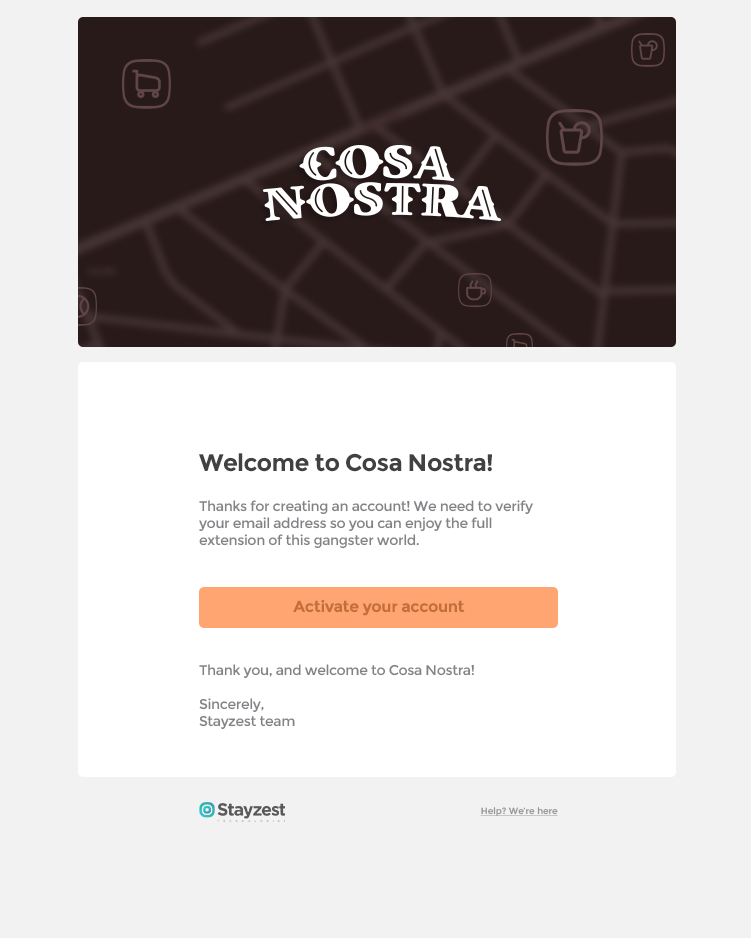
<style>
.page{position:relative;width:751px;height:938px;background:#f2f2f2}
.page>*{position:absolute;margin:0}
.t1{font:24px "Montserrat-Bold";letter-spacing:-0.025em;color:#414042}
.t2{font:14px "Montserrat-Regular";letter-spacing:-0.025em;color:#808285}
.t3{font:16px "Montserrat-Bold";letter-spacing:-0.025em;color:#c36e3d}
.t4{font:9px "Montserrat-Regular";color:#939598;text-decoration:underline}
</style>
<div class="page">
<p class="t1" style="left:199px;top:453px;width:293px;height:19px">Welcome to Cosa Nostra!</p>
<p class="t2" style="left:199px;top:500px;width:334px;height:49px">Thanks for creating an account! We need to verify your email address so you can enjoy the full extension of this gangster world.</p>
<p class="t3" style="left:293px;top:600px;width:172px;height:16px">Activate your account</p>
<p class="t2" style="left:199px;top:664px;width:275px;height:66px">Thank you, and welcome to Cosa Nostra!<br><br>Sincerely,<br>Stayzest team</p>
<p class="t4" style="left:480px;top:807px;width:78px;height:9px">Help? We’re here</p>
</div>
